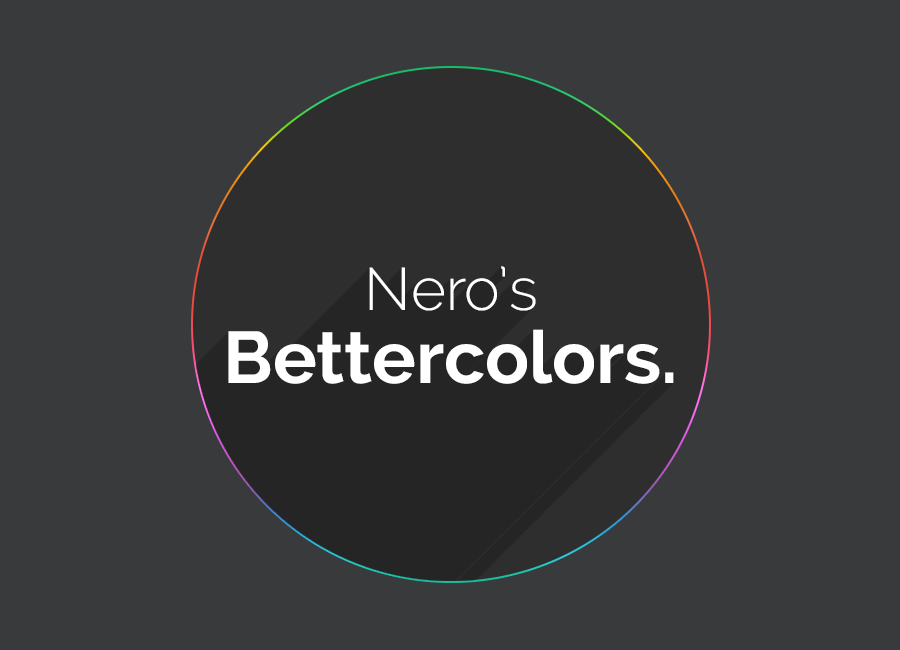
<style>
.page{position:relative;width:900px;height:650px;background:#393a3b}
.page>*{position:absolute;margin:0}
.t1{font:60px "Raleway-Light";color:#ffffff}
.t2{font:73.1px "Raleway-Bold";color:#ffffff}
</style>
<div class="page">
<p class="t1" style="left:369px;top:266px;width:167px;height:45px">Nero’s</p>
<p class="t2" style="left:228px;top:329px;width:446px;height:55px">Bettercolors.</p>
</div>
